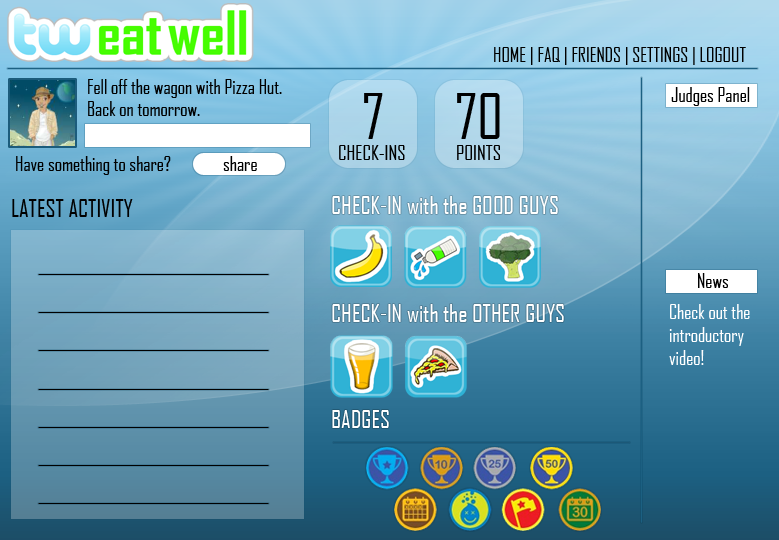
<style>
.page{position:relative;width:779px;height:540px}
.page>*{position:absolute;margin:0}
.t1{font:19px "AgencyFB-Reg";color:#000000}
.t2{font:60px "AgencyFB-Reg";color:#000000}
.t3{font:20px "AgencyFB-Reg";color:#000000}
.t4{font:24px "AgencyFB-Reg";color:#ffffff}
.t5{font:24px "AgencyFB-Reg";color:#000000}
.t6{font:19px "AgencyFB-Reg";color:#ffffff}
</style>
<div class="page">
<p class="t1" style="left:494px;top:47px;width:252px;height:18px">HOME | FAQ | FRIENDS | SETTINGS | LOGOUT</p>
<p class="t1" style="left:88px;top:79px;width:194px;height:37px">Fell off the wagon with Pizza Hut.<br>Back on tomorrow.</p>
<p class="t1" style="left:671px;top:87px;width:79px;height:19px">Judges Panel</p>
<p class="t2" style="left:364px;top:93px;width:19px;height:46px">7</p>
<p class="t2" style="left:457px;top:93px;width:43px;height:46px">70</p>
<p class="t3" style="left:339px;top:145px;width:66px;height:15px">CHECK-INS</p>
<p class="t3" style="left:457px;top:145px;width:43px;height:15px">POINTS</p>
<p class="t1" style="left:16px;top:156px;width:155px;height:19px">Have something to share?</p>
<p class="t1" style="left:223px;top:156px;width:34px;height:15px">share</p>
<p class="t4" style="left:332px;top:196px;width:226px;height:18px">CHECK-IN with the GOOD GUYS</p>
<p class="t5" style="left:12px;top:199px;width:121px;height:18px">LATEST ACTIVITY</p>
<p class="t1" style="left:698px;top:273px;width:30px;height:15px">News</p>
<p class="t4" style="left:332px;top:304px;width:232px;height:18px">CHECK-IN with the OTHER GUYS</p>
<p class="t6" style="left:669px;top:304px;width:81px;height:61px">Check out the<br>introductory<br>video!</p>
<p class="t4" style="left:332px;top:410px;width:57px;height:18px">BADGES</p>
</div>
